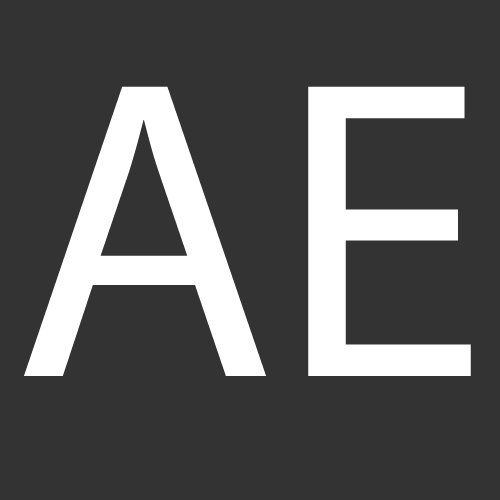
<style>
.page{position:relative;width:500px;height:500px;background:#333333}
.page>*{position:absolute;margin:0}
.t1{font:428.6px "MyriadPro-Regular";color:#ffffff}
</style>
<div class="page">
<p class="t1" style="left:24px;top:86px;width:447px;height:290px">AE</p>
</div>
